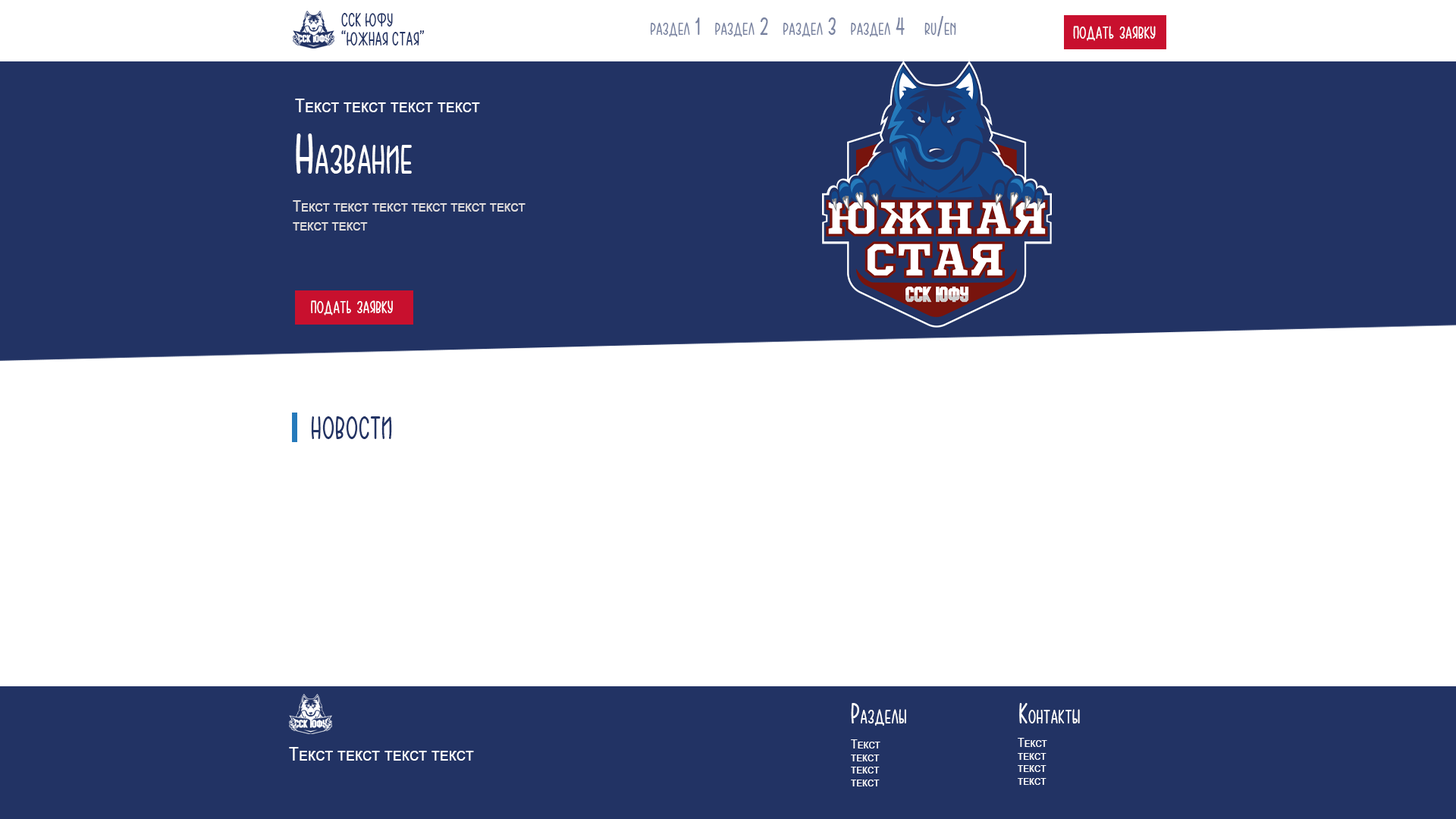
<style>
.page{position:relative;width:1456px;height:819px;background:#ffffff}
.page>*{position:absolute;margin:0}
.t1{font:19px/19px "CarloMelowSans";letter-spacing:0.025em;color:#223364;font-variant:small-caps;scale:0.85 1}
.t2{font:25.3px "CarloMelowSans";letter-spacing:0.025em;color:#7983a1;font-variant:small-caps;scale:0.85 1}
.t3{font:25.3px "CarloMelowSans";letter-spacing:0.025em;color:#ffffff;font-variant:small-caps;scale:0.85 1}
.t4{font:19px "ArialMT";color:#ffffff;font-variant:small-caps;scale:0.85 1}
.t5{font:56.9px "CarloMelowSans";letter-spacing:0.025em;color:#ffffff;font-variant:small-caps;scale:0.85 1}
.t6{font:15.8px/19px "ArialMT";color:#e0dddd;font-variant:small-caps;scale:0.85 1}
.t7{font:31.6px "CarloMelowSans";letter-spacing:0.025em;color:#223364;font-variant:small-caps;scale:0.85 1}
.t8{font:28.4px "CarloMelowSans";letter-spacing:0.025em;color:#ffffff;font-variant:small-caps;scale:0.85 1}
.t9{font:12.6px/12.6px "ArialMT";color:#ffffff;font-variant:small-caps;scale:0.85 1}
</style>
<div class="page">
<p class="t1" style="left:341px;top:13px;width:83px;height:33px">ССК ЮФУ<br>“ЮЖНАЯ СТАЯ”</p>
<p class="t2" style="left:650px;top:16px;width:306px;height:21px">раздел 1   раздел 2   раздел 3   раздел 4    ru/en</p>
<p class="t3" style="left:1073px;top:26px;width:83px;height:15px">подать заявку</p>
<p class="t4" style="left:295px;top:99px;width:185px;height:13px">Текст текст текст текст</p>
<p class="t5" style="left:296px;top:133px;width:116px;height:41px">Название</p>
<p class="t6" style="left:293px;top:200px;width:233px;height:31px">Текст текст текст текст текст текст текст текст</p>
<p class="t3" style="left:311px;top:300px;width:82px;height:15px">подать заявку</p>
<p class="t7" style="left:311px;top:416px;width:81px;height:23px">НОВОСТИ</p>
<p class="t8" style="left:851px;top:703px;width:229px;height:23px">Разделы                     Контакты</p>
<p class="t9" style="left:1018px;top:738px;width:29px;height:47px">Текст <br>текст <br>текст <br>текст</p>
<p class="t4" style="left:289px;top:747px;width:185px;height:14px">Текст текст текст текст</p>
<p class="t9" style="left:851px;top:739px;width:29px;height:47px">Текст <br>текст <br>текст <br>текст</p>
</div>
